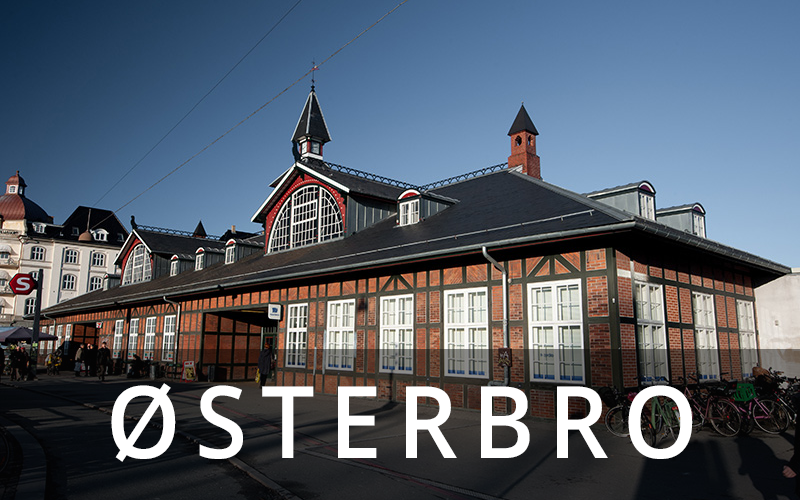
<style>
.page{position:relative;width:800px;height:500px}
.page>*{position:absolute;margin:0}
.t1{font:100px "OpenSans-Semibold";letter-spacing:0.15em;color:#ffffff;scale:0.95 1}
</style>
<div class="page">
<p class="t1" style="left:111px;top:383px;width:582px;height:79px">ØSTERBRO</p>
</div>
